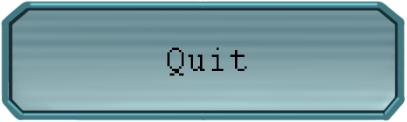
<style>
.page{position:relative;width:407px;height:122px}
.page>*{position:absolute;margin:0}
.t1{font:37.5px "Courier";color:#000000}
</style>
<div class="page">
<p class="t1" style="left:167px;top:47px;width:80px;height:29px">Quit</p>
</div>
